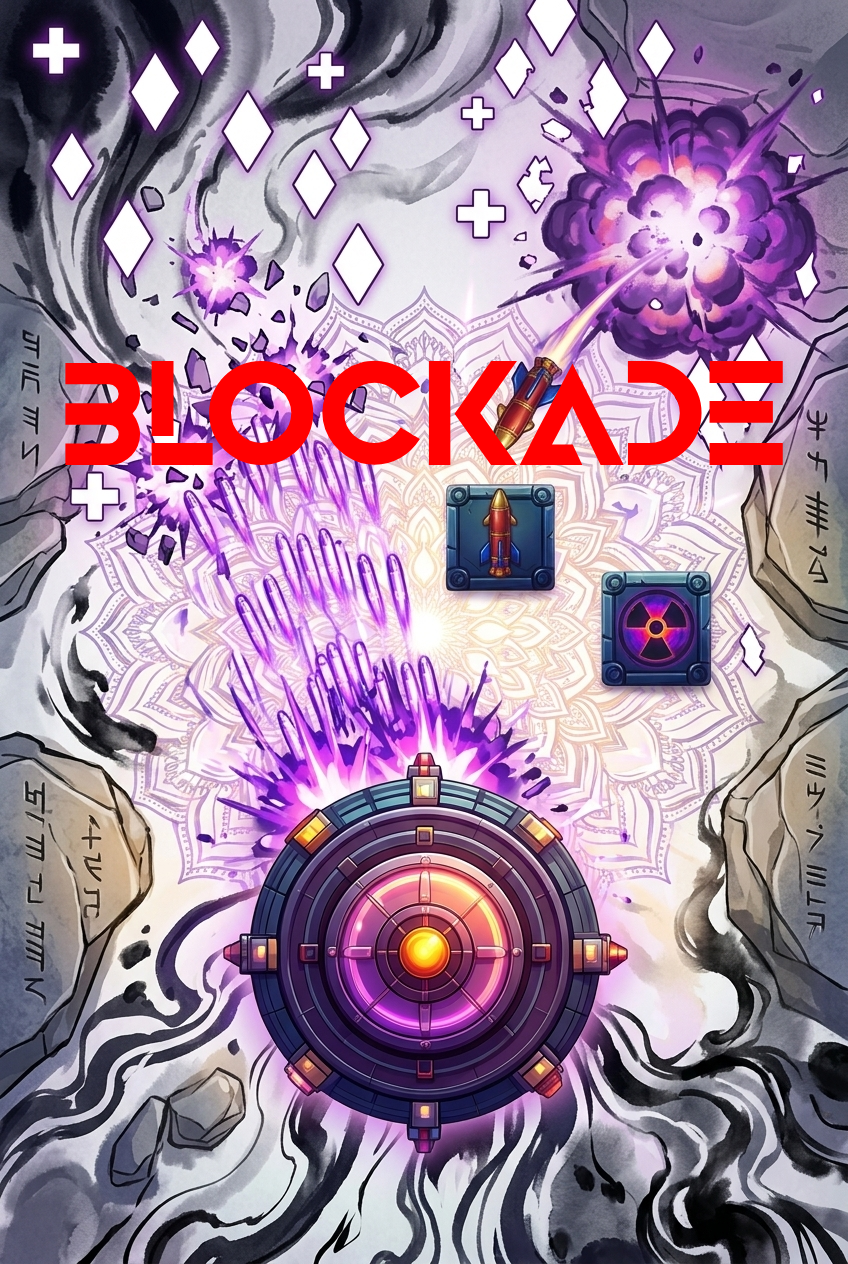
<style>
.page{position:relative;width:848px;height:1264px}
.page>*{position:absolute;margin:0}
.t1{font:150px "Movement-Regular";color:#ff0000}
</style>
<div class="page">
<p class="t1" style="left:65px;top:360px;width:718px;height:105px">BLOCKADE</p>
</div>
